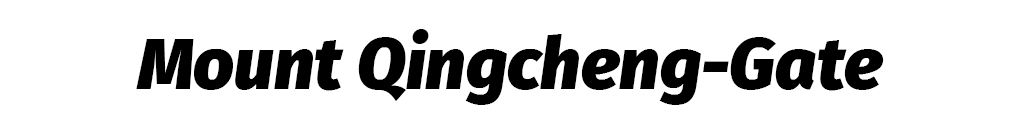
<style>
.page{position:relative;width:1024px;height:128px;background:#ffffff}
.page>*{position:absolute;margin:0}
.t1{font:71.8px "FiraSans-BlackItalic";color:#000000}
</style>
<div class="page">
<p class="t1" style="left:136px;top:29px;width:748px;height:76px">Mount Qingcheng-Gate</p>
</div>
